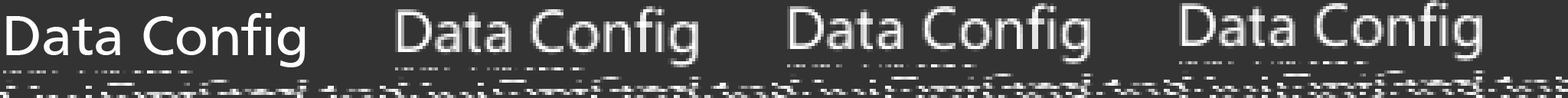
<style>
.page{position:relative;width:1568px;height:98px;background:#333333}
.page>*{position:absolute;margin:0}
.t1{font:58.2px "Frutiger";color:#ffffff}
</style>
<div class="page">
<p class="t1" style="left:6px;top:13px;width:299px;height:54px">Data Config</p>
</div>
